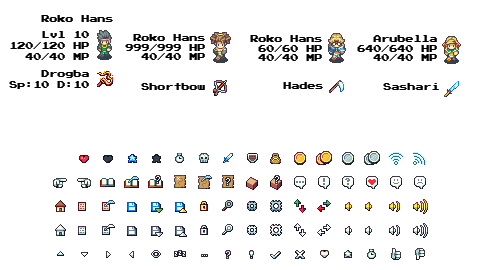
<style>
.page{position:relative;width:480px;height:270px;background:#ffffff}
.page>*{position:absolute;margin:0}
.t1{font:8px "PressStart2P-Regular";color:#000000}
.t2{font:8px/11px "PressStart2P-Regular";color:#000000}
</style>
<div class="page">
<p class="t1" style="left:41px;top:15px;width:72px;height:7px">Roko Hans</p>
<p class="t2" style="left:10px;top:31px;width:79px;height:29px;text-align:right">Lvl 10<br>120/120 HP<br>40/40 MP</p>
<p class="t1" style="left:125px;top:34px;width:80px;height:26px;text-align:right">Roko Hans<br>999/999 HP<br>40/40 MP</p>
<p class="t1" style="left:250px;top:35px;width:72px;height:26px;text-align:right">Roko Hans<br>60/60 HP<br>40/40 MP</p>
<p class="t1" style="left:357px;top:35px;width:80px;height:26px;text-align:right">Arubella<br>640/640 HP<br>40/40 MP</p>
<p class="t1" style="left:41px;top:70px;width:48px;height:8px">Drogba</p>
<p class="t1" style="left:9px;top:81px;width:80px;height:8px">Sp:10 D:10</p>
<p class="t1" style="left:141px;top:83px;width:64px;height:7px">Shortbow</p>
<p class="t1" style="left:283px;top:82px;width:40px;height:7px">Hades</p>
<p class="t1" style="left:383px;top:83px;width:56px;height:7px">Sashari</p>
</div>
